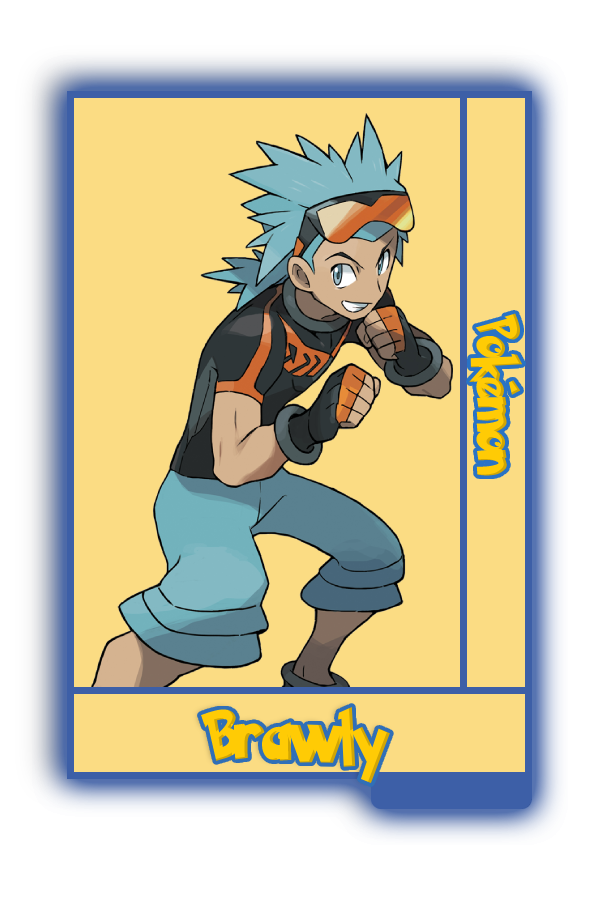
<style>
.page{position:relative;width:600px;height:900px;background:#fbdc83}
.page>*{position:absolute;margin:0}
.t1{font:48.8px "PokemonSolidNormal";color:#ffcb05;scale:0.8 1}
.t2{font:56.6px "PokemonSolidNormal";color:#ffcb05;scale:0.92 1}
</style>
<div class="page">
<p class="t1" style="left:469px;top:313px;width:54px;height:163px;rotate:90deg">Pokémon</p>
<p class="t2" style="left:201px;top:706px;width:189px;height:77px">Brawly</p>
</div>
